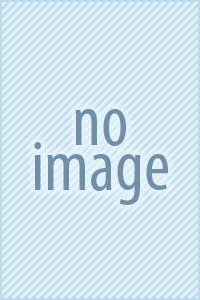
<style>
.page{position:relative;width:200px;height:300px;background:#e5f4fa}
.page>*{position:absolute;margin:0}
.t1{font:72px/15px "MyriadPro-Cond";color:#728fa8}
</style>
<div class="page">
<p class="t1" style="left:34px;top:109px;width:134px;height:96px;text-align:center">no<br><br><br>image</p>
</div>
